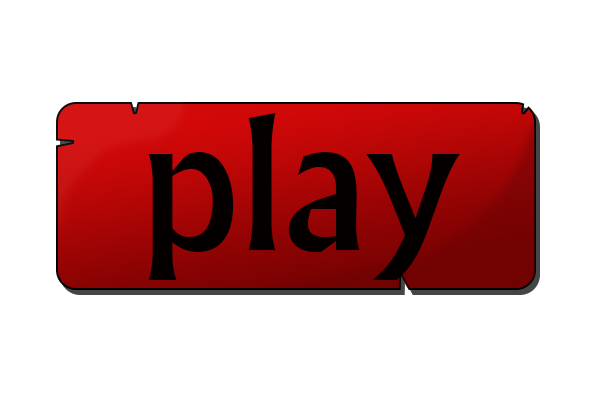
<style>
.page{position:relative;width:600px;height:400px;background:#ffffff}
.page>*{position:absolute;margin:0}
.t1{font:200px "Narkisim";color:#050000}
</style>
<div class="page">
<p class="t1" style="left:148px;top:113px;width:312px;height:167px">play</p>
</div>
